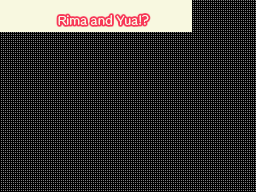
<style>
.page{position:relative;width:256px;height:192px;background:#000000}
.page>*{position:absolute;margin:0}
.t1{font:10.7px "HummingStd-M";letter-spacing:0.02em;color:#f8f8e8}
</style>
<div class="page">
<p class="t1" style="left:58px;top:15px;width:91px;height:10px">Rima and Yua!?</p>
</div>
